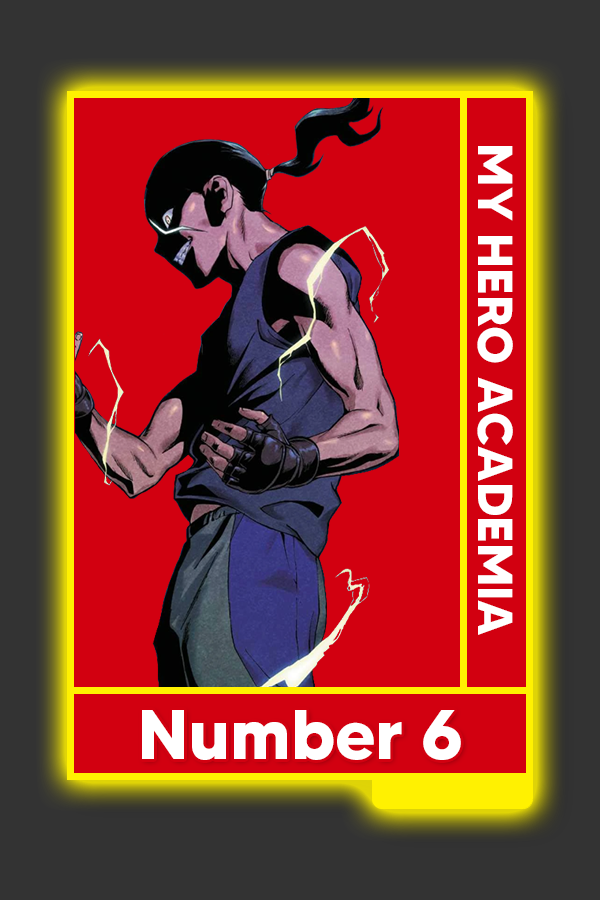
<style>
.page{position:relative;width:600px;height:900px;background:#d20010}
.page>*{position:absolute;margin:0}
.t1{font:48.8px "MADETOMMY-Bold";color:#ffffff}
.t2{font:70.1px "MADETOMMY-Bold";color:#ffffff}
</style>
<div class="page">
<p class="t1" style="left:477px;top:146px;width:36px;height:489px;rotate:90deg">MY HERO ACADEMIA</p>
<p class="t2" style="left:142px;top:710px;width:319px;height:50px">Number 6</p>
</div>
